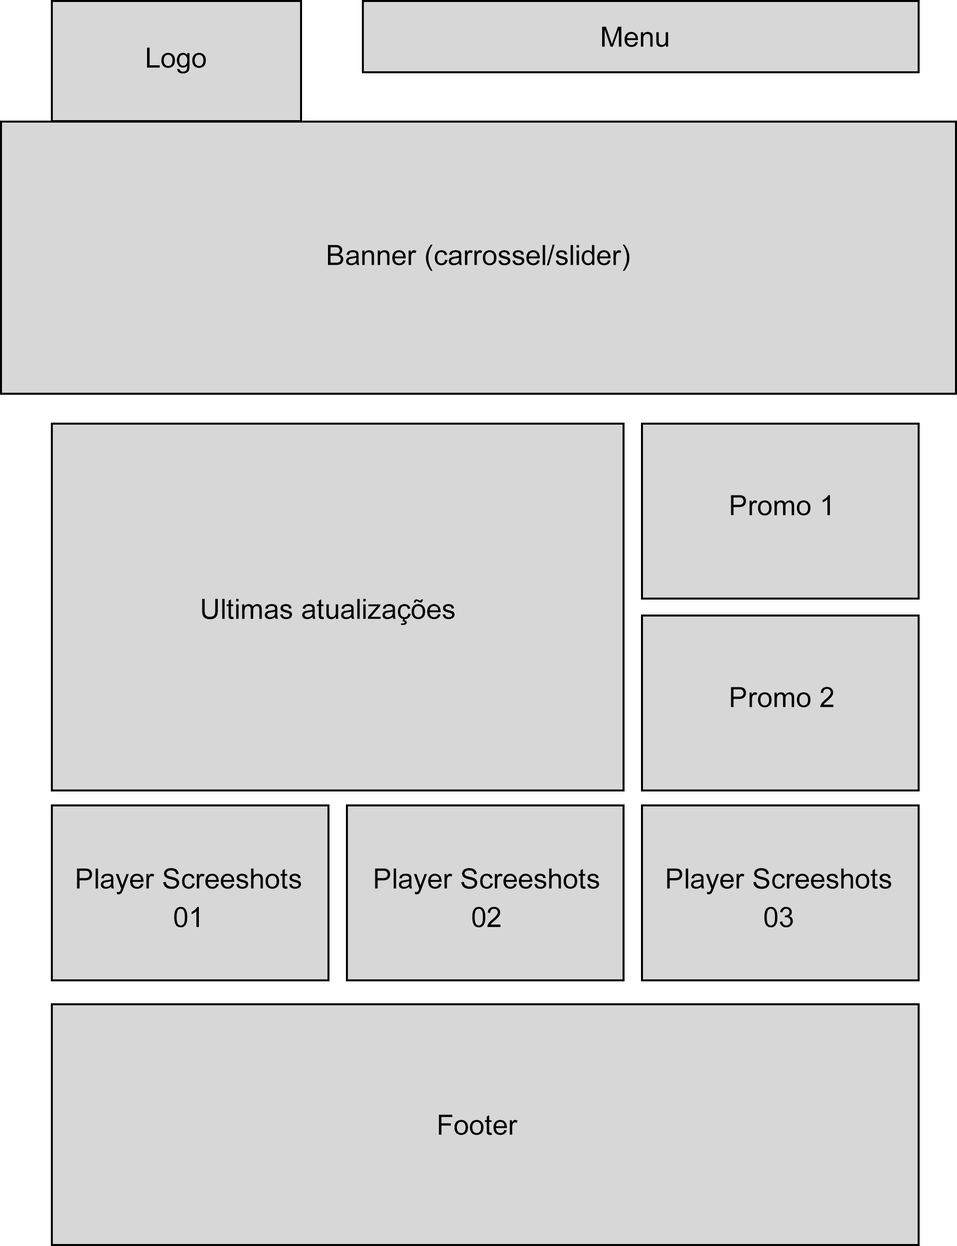
<style>
.page{position:relative;width:957px;height:1246px;background:#d7d7d7}
.page>*{position:absolute;margin:0}
.t1{font:28px "ArialMT";color:#000000}
</style>
<div class="page">
<p class="t1" style="left:602px;top:26px;width:66px;height:21px">Menu</p>
<p class="t1" style="left:147px;top:47px;width:59px;height:27px">Logo</p>
<p class="t1" style="left:328px;top:244px;width:302px;height:27px">Banner (carrossel/slider)</p>
<p class="t1" style="left:731px;top:495px;width:99px;height:21px">Promo 1</p>
<p class="t1" style="left:202px;top:599px;width:253px;height:26px">Ultimas atualizações</p>
<p class="t1" style="left:731px;top:687px;width:102px;height:21px">Promo 2</p>
<p class="t1" style="left:77px;top:868px;width:224px;height:60px;text-align:center">Player Screeshots<br>01</p>
<p class="t1" style="left:375px;top:868px;width:224px;height:60px;text-align:center">Player Screeshots<br>02</p>
<p class="t1" style="left:667px;top:868px;width:224px;height:60px;text-align:center">Player Screeshots<br>03</p>
<p class="t1" style="left:439px;top:1114px;width:79px;height:21px">Footer</p>
</div>
